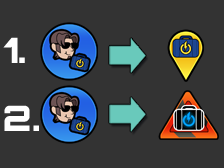
<style>
.page{position:relative;width:224px;height:168px;background:#333333}
.page>*{position:absolute;margin:0}
.t1{font:35px "Orbitron-Black";color:#ffffff}
</style>
<div class="page">
<p class="t1" style="left:3px;top:37px;width:22px;height:26px">1.</p>
<p class="t1" style="left:4px;top:105px;width:35px;height:26px">2.</p>
</div>
